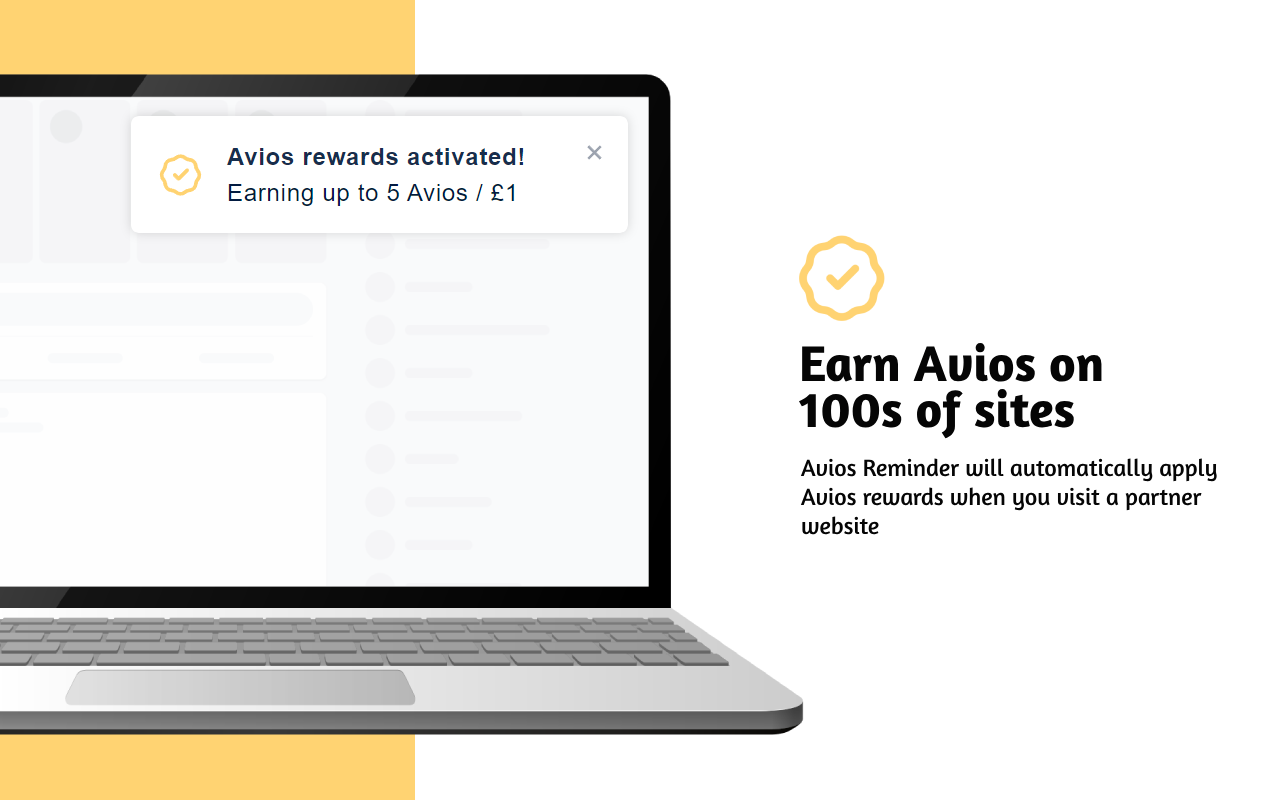
<style>
.page{position:relative;width:1280px;height:800px;background:#ffffff}
.page>*{position:absolute;margin:0}
.t1{font:51px "Amaranth-Bold";color:#050505}
.t2{font:24px "Amaranth-Regular";color:#050505}
</style>
<div class="page">
<p class="t1" style="left:799px;top:343px;width:303px;height:96px">Earn Avios on 100s of sites</p>
<p class="t2" style="left:800px;top:458px;width:417px;height:77px">Avios Reminder will automatically apply Avios rewards when you visit a partner website</p>
</div>
